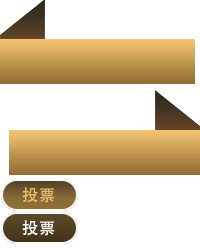
<style>
.page{position:relative;width:200px;height:250px;background:#ffffff}
.page>*{position:absolute;margin:0}
.t1{font:16px "AdobeHeitiStd-Regular";letter-spacing:0.06em;color:#e8ba6b;text-transform:uppercase}
.t2{font:16px "AdobeHeitiStd-Regular";letter-spacing:0.06em;color:#ffffff;text-transform:uppercase}
</style>
<div class="page">
<p class="t1" style="left:22px;top:187px;width:33px;height:16px">投票</p>
<p class="t2" style="left:22px;top:220px;width:33px;height:16px">投票</p>
</div>
